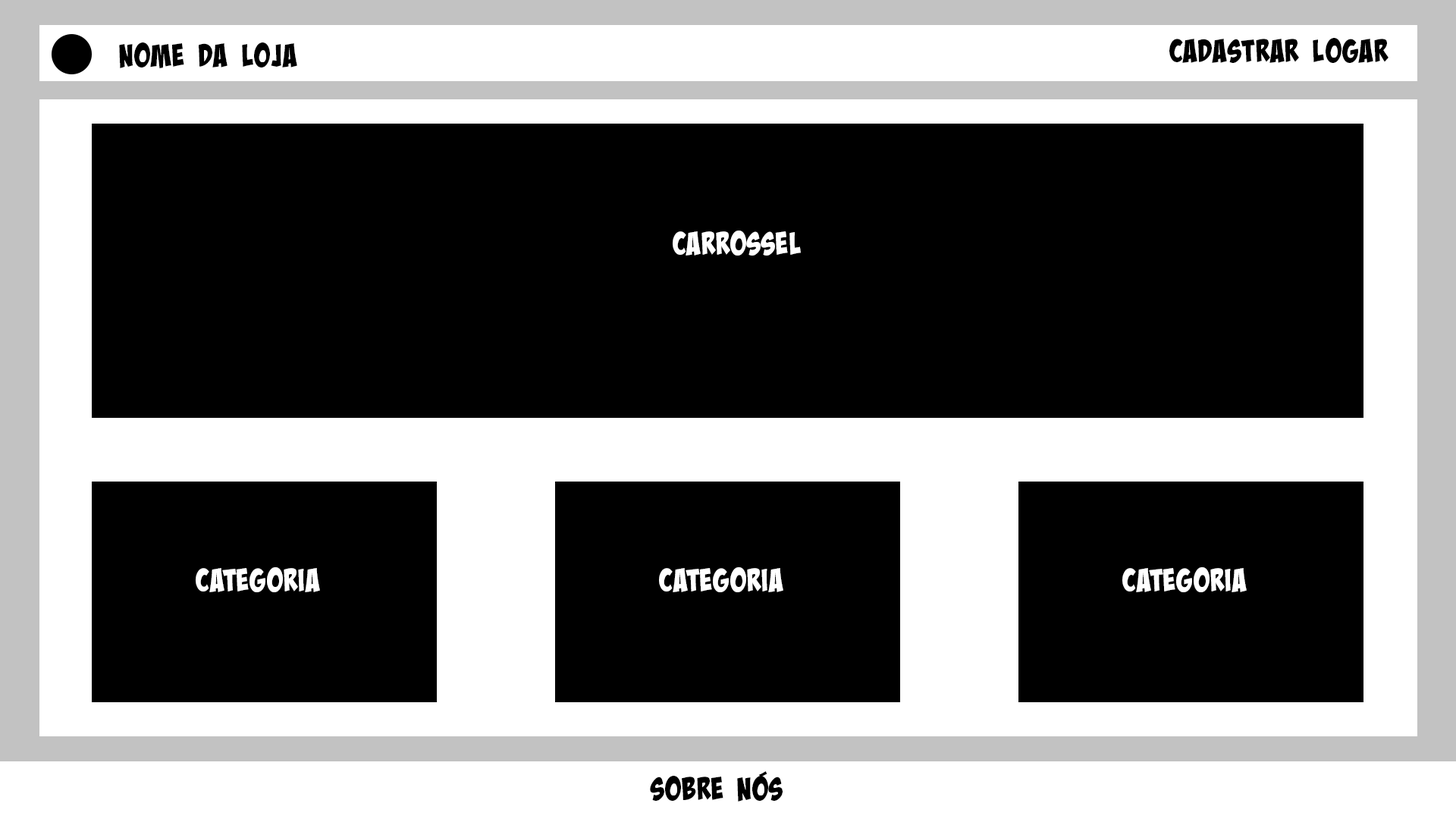
<style>
.page{position:relative;width:1456px;height:819px;background:#000000}
.page>*{position:absolute;margin:0}
.t1{font:31.6px "BadaBoomProBB";color:#000000}
.t2{font:31.6px "BadaBoomProBB";color:#ffffff}
</style>
<div class="page">
<p class="t1" style="left:1169px;top:38px;width:219px;height:25px">Cadastrar Logar</p>
<p class="t1" style="left:119px;top:42px;width:178px;height:26px">NOME DA LOJA</p>
<p class="t2" style="left:673px;top:231px;width:128px;height:25px">Carrossel</p>
<p class="t2" style="left:196px;top:567px;width:124px;height:25px">Categoria</p>
<p class="t2" style="left:659px;top:567px;width:124px;height:25px">Categoria</p>
<p class="t2" style="left:1122px;top:567px;width:125px;height:25px">Categoria</p>
<p class="t1" style="left:650px;top:771px;width:133px;height:31px">Sobre nós</p>
</div>
